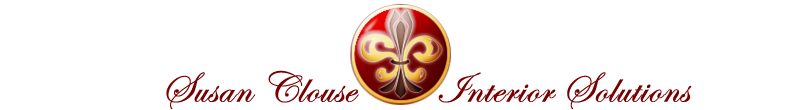
<style>
.page{position:relative;width:800px;height:110px;background:#ffffff}
.page>*{position:absolute;margin:0}
.t1{font:43.8px "EdwardianScriptITC";color:#770001;font-weight:bold}
</style>
<div class="page">
<p class="t1" style="left:166px;top:70px;width:526px;height:40px">Susan Clouse         Interior Solutions</p>
</div>
